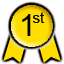
<style>
.page{position:relative;width:64px;height:64px;background:#ffffff}
.page>*{position:absolute;margin:0}
.t1{font:30px "ArialMT";color:#000000}
.t2{font:15px "ArialMT";color:#000000}
</style>
<div class="page">
<p class="t1" style="left:22px;top:14px;width:9px;height:22px">1</p>
<p class="t2" style="left:32px;top:12px;width:13px;height:11px">st</p>
</div>
